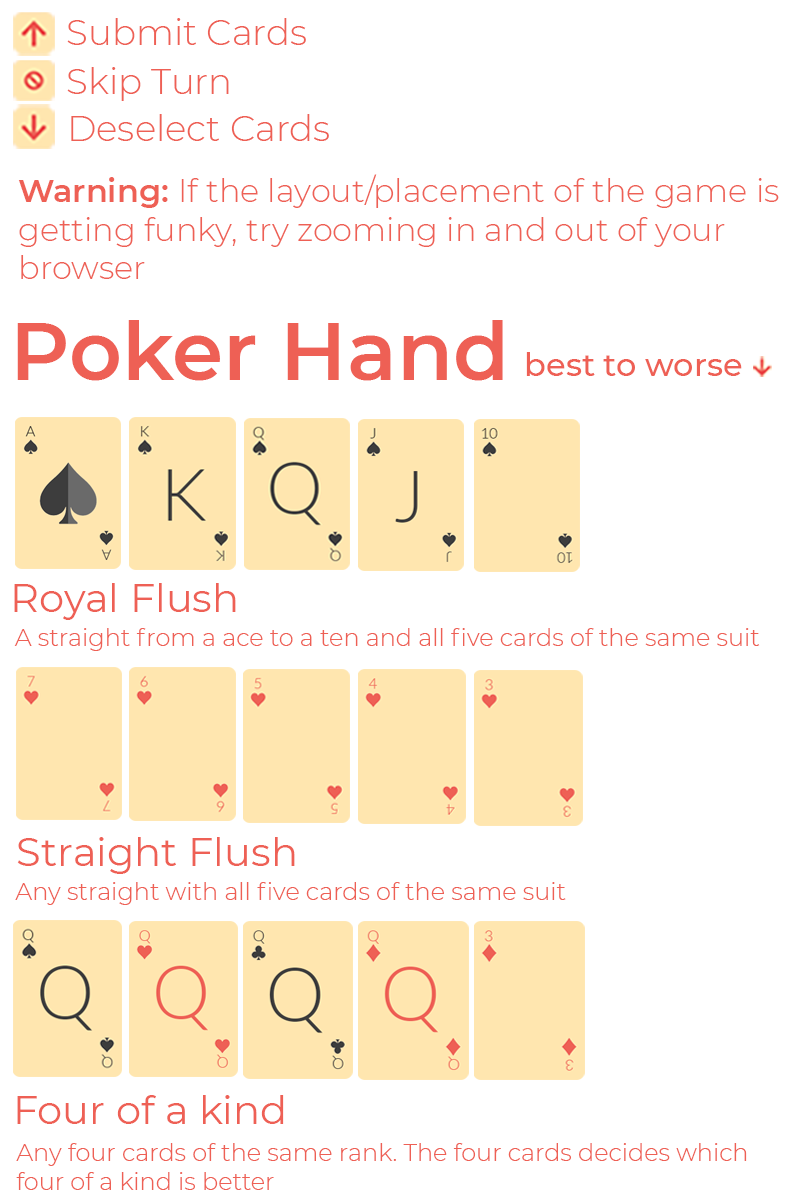
<style>
.page{position:relative;width:800px;height:1200px;background:#ffffff}
.page>*{position:absolute;margin:0}
.t1{font:35.7px "Montserrat-Light";color:#ee6055}
.t2{font:32px "Montserrat-Light";color:#ee6055}
.t3{font:32px "Montserrat-SemiBold";color:#ee6055}
.t4{font:82px "Montserrat-SemiBold";color:#ee6055}
.t5{font:32px "Montserrat-Medium";color:#ee6055}
.t6{font:40px "Montserrat-Regular";color:#ee6055}
.t7{font:24px "Montserrat-Light";color:#ee6055}
.t8{font:40.1px "Montserrat-Regular";color:#ee6055}
.t9{font:39.9px "Montserrat-Regular";color:#ee6055}
</style>
<div class="page">
<p class="t1" style="left:67px;top:18px;width:239px;height:27px">Submit Cards</p>
<p class="t1" style="left:67px;top:67px;width:162px;height:34px">Skip Turn</p>
<p class="t1" style="left:71px;top:114px;width:258px;height:27px">Deselect Cards</p>
<p class="t2" style="left:18px;top:174px;width:761px;height:105px"><span class="t3">Warning: </span>If the layout/placement of the game is getting funky, try zooming in and out of your browser</p>
<p class="t4" style="left:17px;top:320px;width:486px;height:61px">Poker Hand</p>
<p class="t5" style="left:526px;top:352px;width:216px;height:24px">best to worse</p>
<p class="t6" style="left:14px;top:583px;width:222px;height:37px">Royal Flush</p>
<p class="t7" style="left:14px;top:628px;width:746px;height:23px">A straight from a ace to a ten and all five cards of the same suit</p>
<p class="t8" style="left:17px;top:837px;width:278px;height:37px">Straight Flush</p>
<p class="t7" style="left:15px;top:882px;width:551px;height:23px">Any straight with all five cards of the same suit</p>
<p class="t9" style="left:17px;top:1095px;width:267px;height:29px">Four of a kind</p>
<p class="t7" style="left:16px;top:1143px;width:731px;height:47px">Any four cards of the same rank. The four cards decides which four of a kind is better</p>
</div>
